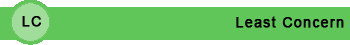
<style>
.page{position:relative;width:350px;height:45px;background:#60c659}
.page>*{position:absolute;margin:0}
.t1{font:14px "ArialMT";letter-spacing:0.075em;color:#000000;font-weight:bold}
</style>
<div class="page">
<p class="t1" style="left:22px;top:16px;width:19px;height:11px">LC</p>
<p class="t1" style="left:236px;top:16px;width:108px;height:12px">Least Concern</p>
</div>
